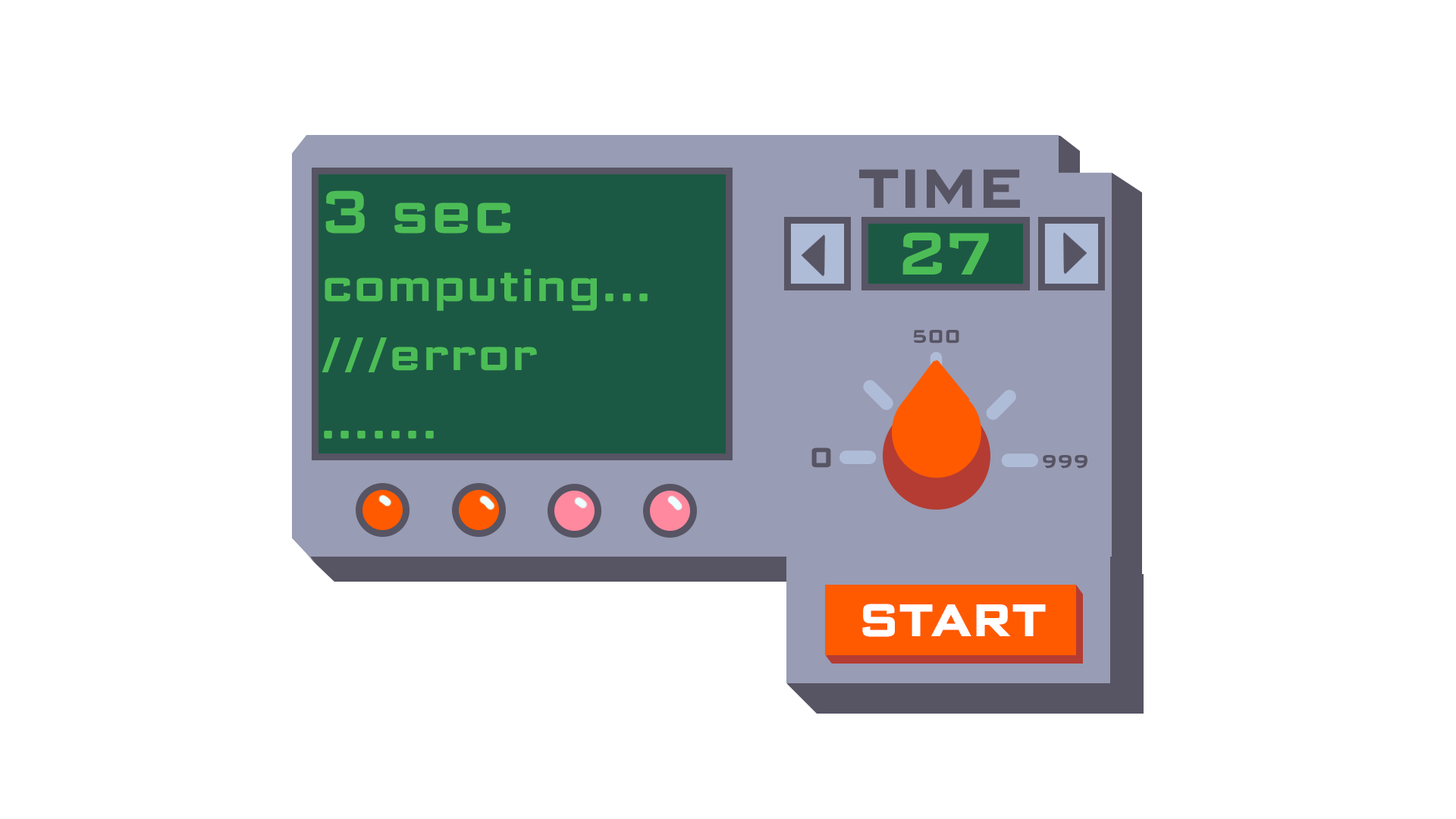
<style>
.page{position:relative;width:1456px;height:819px;background:#ffffff}
.page>*{position:absolute;margin:0}
.t1{font:54.6px "ScienceGothic-SemiBold";letter-spacing:0.02em;color:#575464}
.t2{font:59.1px "ScienceGothic-Medium";letter-spacing:0.02em;color:#4cbd56}
.t3{font:45.5px "ScienceGothic-Medium";letter-spacing:0.02em;color:#4cbd56}
.t4{font:18.2px "ScienceGothic-SemiBold";letter-spacing:0.02em;color:#575464}
.t5{font:27.3px "ScienceGothic-SemiBold";letter-spacing:0.02em;color:#575464}
.t6{font:45.5px "ScienceGothic-SemiBold";letter-spacing:0.02em;color:#ffffff}
</style>
<div class="page">
<p class="t1" style="left:859px;top:169px;width:161px;height:39px">TIME</p>
<p class="t2" style="left:325px;top:190px;width:185px;height:44px">3 sec</p>
<p class="t2" style="left:902px;top:232px;width:87px;height:43px">27</p>
<p class="t3" style="left:325px;top:268px;width:323px;height:43px">computing...</p>
<p class="t4" style="left:914px;top:330px;width:45px;height:14px">500</p>
<p class="t3" style="left:322px;top:337px;width:215px;height:35px">///error</p>
<p class="t3" style="left:324px;top:431px;width:110px;height:8px">.......</p>
<p class="t5" style="left:811px;top:447px;width:20px;height:21px">0</p>
<p class="t4" style="left:1043px;top:455px;width:44px;height:14px">999</p>
<p class="t6" style="left:862px;top:604px;width:184px;height:33px">START</p>
</div>
